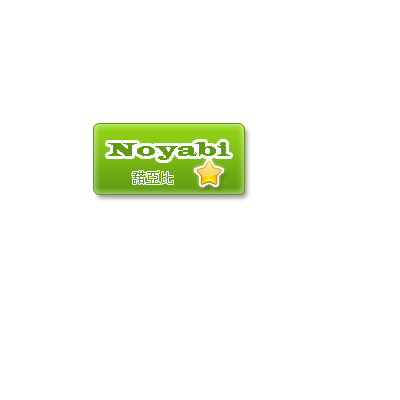
<style>
.page{position:relative;width:400px;height:400px;background:#ffffff}
.page>*{position:absolute;margin:0}
.t1{font:20px "LatinWide";color:#5f9d10}
.t2{font:14px "MingLiU";color:#5f9d10}
</style>
<div class="page">
<p class="t1" style="left:108px;top:142px;width:122px;height:18px">Noyabi</p>
<p class="t2" style="left:132px;top:171px;width:41px;height:13px">諾亞比</p>
</div>
